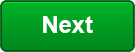
<style>
.page{position:relative;width:135px;height:52px}
.page>*{position:absolute;margin:0}
.t1{font:24px "Arial-BoldMT";letter-spacing:-0.01em;color:#ffffff}
</style>
<div class="page">
<p class="t1" style="left:43px;top:16px;width:50px;height:17px">Next</p>
</div>
